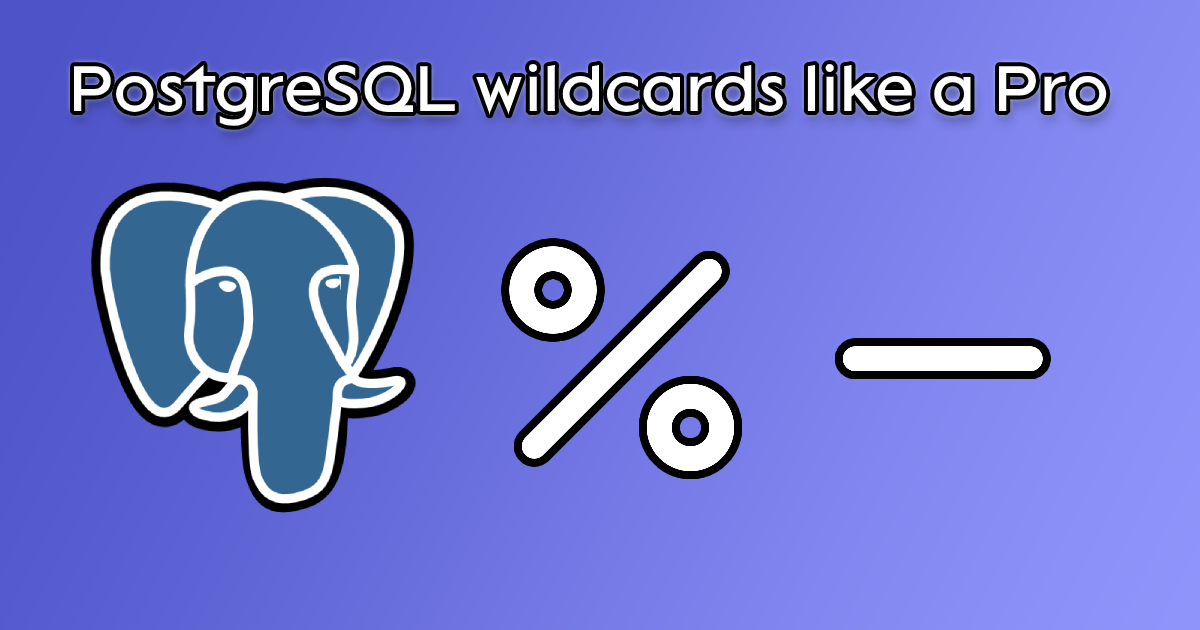
<style>
.page{position:relative;width:1200px;height:630px}
.page>*{position:absolute;margin:0}
.t1{font:66px "Lack-Regular";color:#ffffff}
</style>
<div class="page">
<p class="t1" style="left:73px;top:63px;width:1034px;height:63px">PostgreSQL wildcards like a Pro</p>
</div>
